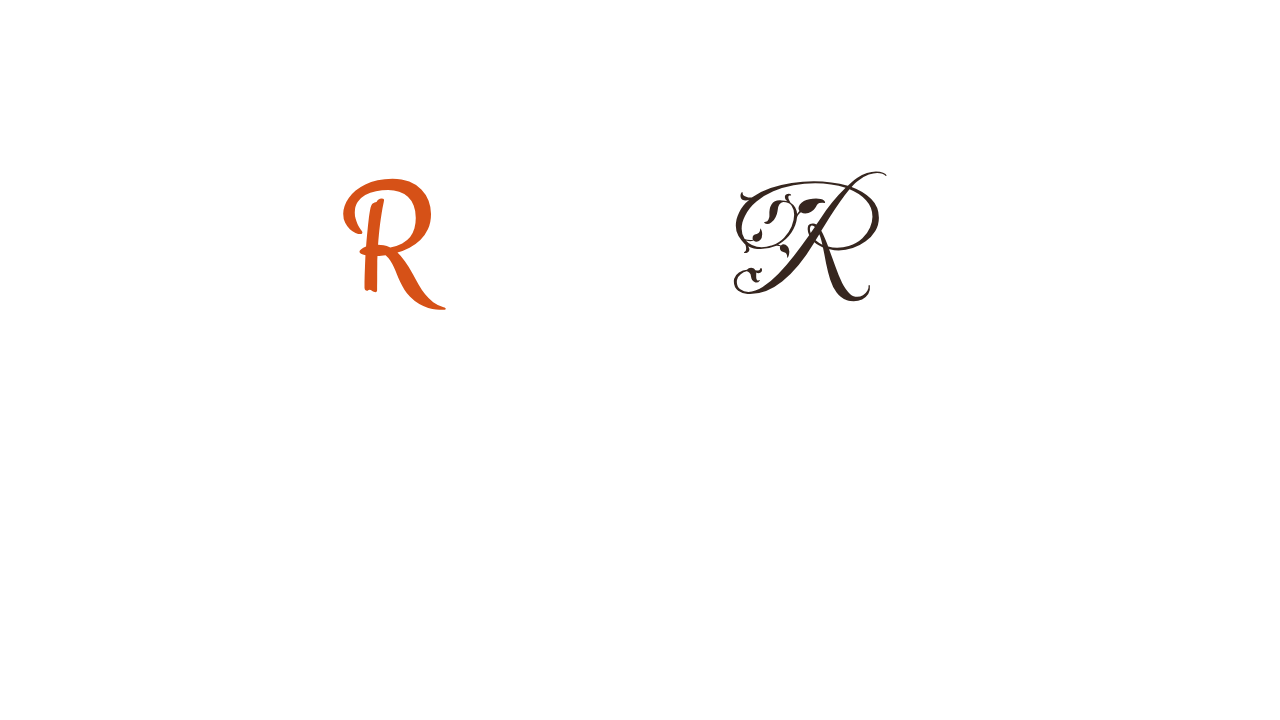
<style>
.page{position:relative;width:1280px;height:720px;background:#ffffff}
.page>*{position:absolute;margin:0}
.t1{font:150px "FleurDeLeah-Regular";color:#36261f}
.t2{font:150px "Engagement-Regular";color:#d65117}
</style>
<div class="page">
<p class="t1" style="left:733px;top:171px;width:154px;height:131px">R</p>
<p class="t2" style="left:343px;top:178px;width:103px;height:132px">R</p>
</div>
